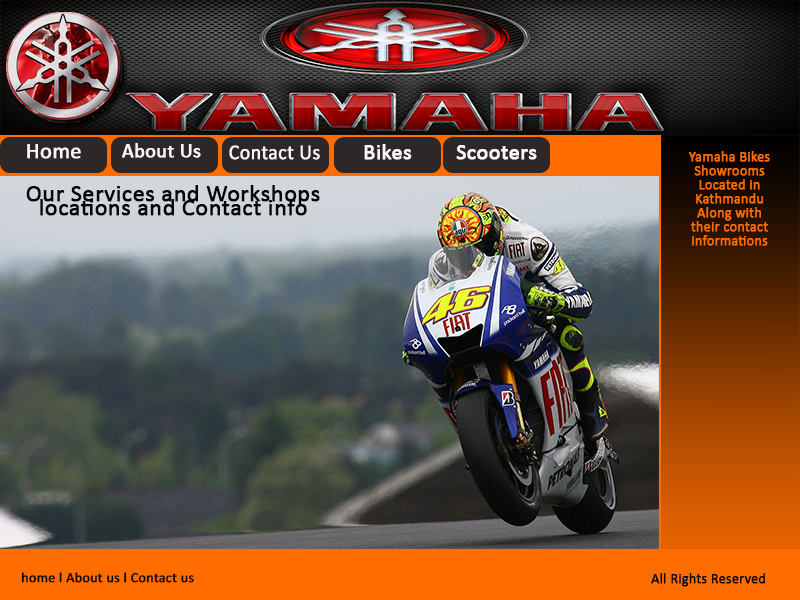
<style>
.page{position:relative;width:800px;height:600px}
.page>*{position:absolute;margin:0}
.t1{font:22px "Calibri";color:#f9f6f6;font-weight:bold}
.t2{font:20px "Calibri";color:#f9f6f6;font-weight:bold}
.t3{font:21.2px "Calibri";color:#f9f6f6;font-weight:bold;scale:0.93 1}
.t4{font:14px/14px "Calibri";color:#ff6d00;font-weight:bold}
.t5{font:24px/14px "Calibri";color:#060606;font-weight:bold}
.t6{font:14.1px "Calibri";color:#070707;font-weight:bold}
.t7{font:14px "Calibri";color:#070707;font-weight:bold}
</style>
<div class="page">
<p class="t1" style="left:27px;top:144px;width:54px;height:15px">Home</p>
<p class="t2" style="left:122px;top:143px;width:79px;height:15px">About Us</p>
<p class="t3" style="left:229px;top:145px;width:91px;height:15px">Contact Us</p>
<p class="t1" style="left:364px;top:144px;width:48px;height:16px">Bikes</p>
<p class="t1" style="left:456px;top:145px;width:81px;height:15px">Scooters</p>
<p class="t4" style="left:688px;top:151px;width:82px;height:95px;text-align:center">Yamaha Bikes <br>Showrooms<br>Located in <br>Kathmandu <br>Along with <br>their contact<br>informations</p>
<p class="t5" style="left:26px;top:185px;width:294px;height:31px;text-align:center">Our Services and Workshops <br>locations and Contact info</p>
<p class="t6" style="left:21px;top:572px;width:173px;height:11px">home l About us l Contact us</p>
<p class="t7" style="left:651px;top:573px;width:114px;height:14px">All Rights Reserved</p>
</div>
